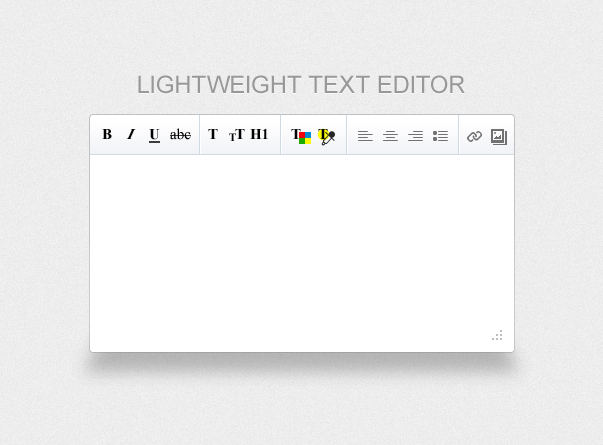
<style>
.page{position:relative;width:603px;height:445px;background:#ffffff}
.page>*{position:absolute;margin:0}
.t1{font:24px "ArialMT";color:#989898;text-transform:uppercase}
.t2{font:15px "TimesNewRomanPS-BoldMT";color:#000000;text-transform:uppercase}
.t3{font:15px "TimesNewRomanPS-BoldItalicMT";color:#000000;text-transform:uppercase;font-style:italic}
.t4{font:15px "TimesNewRomanPS-BoldMT";color:#000000;text-transform:uppercase;text-decoration:underline}
.t5{font:15px "TimesNewRomanPSMT";color:#000000}
.t6{font:11px "TimesNewRomanPS-BoldMT";color:#000000;text-transform:uppercase}
</style>
<div class="page">
<p class="t1" style="left:138px;top:75px;width:327px;height:19px">Lightweight Text Editor</p>
<p class="t2" style="left:102px;top:129px;width:10px;height:10px">B</p>
<p class="t3" style="left:126px;top:129px;width:10px;height:10px">I</p>
<p class="t4" style="left:149px;top:129px;width:11px;height:14px">U</p>
<p class="t5" style="left:170px;top:128px;width:21px;height:12px">abc</p>
<p class="t2" style="left:208px;top:129px;width:10px;height:10px">T</p>
<p class="t6" style="left:229px;top:133px;width:7px;height:8px">T</p>
<p class="t2" style="left:235px;top:129px;width:10px;height:10px">T</p>
<p class="t2" style="left:250px;top:128px;width:18px;height:11px">H1</p>
<p class="t2" style="left:291px;top:129px;width:10px;height:10px">T</p>
<p class="t2" style="left:318px;top:129px;width:10px;height:10px">T</p>
</div>
